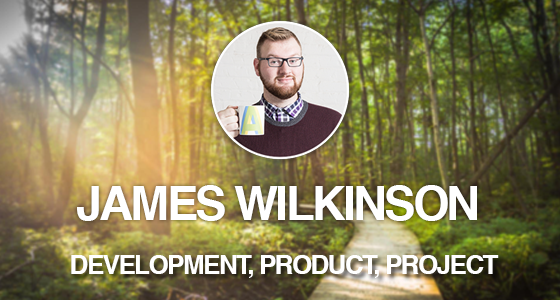
<style>
.page{position:relative;width:560px;height:300px}
.page>*{position:absolute;margin:0}
.t1{font:47px "Helvetica-Bold";letter-spacing:-0.06em;color:#ffffff}
.t2{font:26px "Helvetica-Bold";letter-spacing:-0.06em;color:#ffffff}
</style>
<div class="page">
<p class="t1" style="left:77px;top:185px;width:400px;height:36px">JAMES WILKINSON</p>
<p class="t2" style="left:71px;top:255px;width:428px;height:23px">DEVELOPMENT, PRODUCT, PROJECT</p>
</div>
